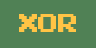
<style>
.page{position:relative;width:96px;height:48px;background:#508155}
.page>*{position:absolute;margin:0}
.t1{font:36px "8bitemul8r";color:#ffc445}
</style>
<div class="page">
<p class="t1" style="left:19px;top:14px;width:57px;height:18px">xor</p>
</div>
